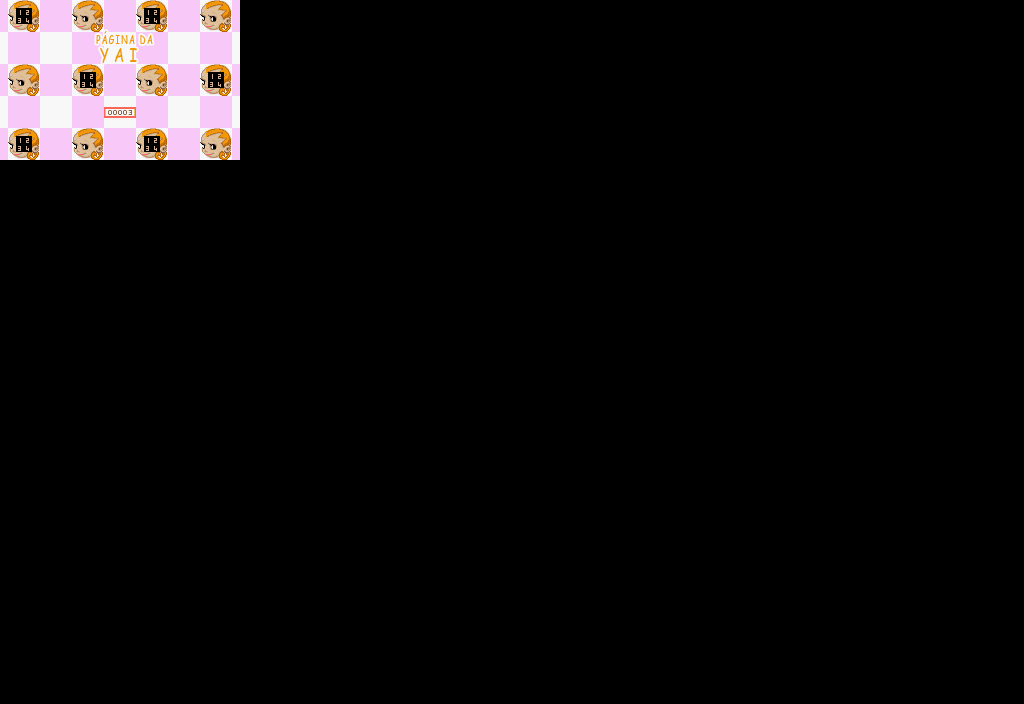
<style>
.page{position:relative;width:1024px;height:704px;background:#000000}
.page>*{position:absolute;margin:0}
.t1{font:12px "ComicSansMS";letter-spacing:0.16em;color:#f09808;scale:0.67 1}
.t2{font:19px "ComicSansMS";letter-spacing:0.38em;color:#f09808;scale:0.73 1}
</style>
<div class="page">
<p class="t1" style="left:96px;top:31px;width:57px;height:13px">PÁGINA DA</p>
<p class="t2" style="left:100px;top:48px;width:37px;height:15px">YAI</p>
</div>
